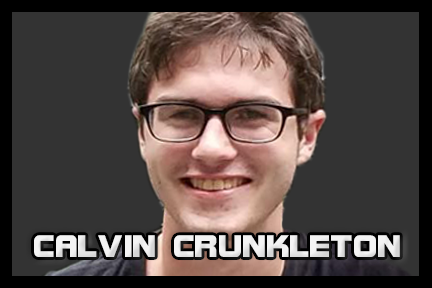
<style>
.page{position:relative;width:432px;height:288px;background:#333333}
.page>*{position:absolute;margin:0}
.t1{font:33.3px "BolsterBold";color:#f3f3f3}
</style>
<div class="page">
<p class="t1" style="left:34px;top:235px;width:366px;height:22px">CALVIN CRUNKLETON</p>
</div>
